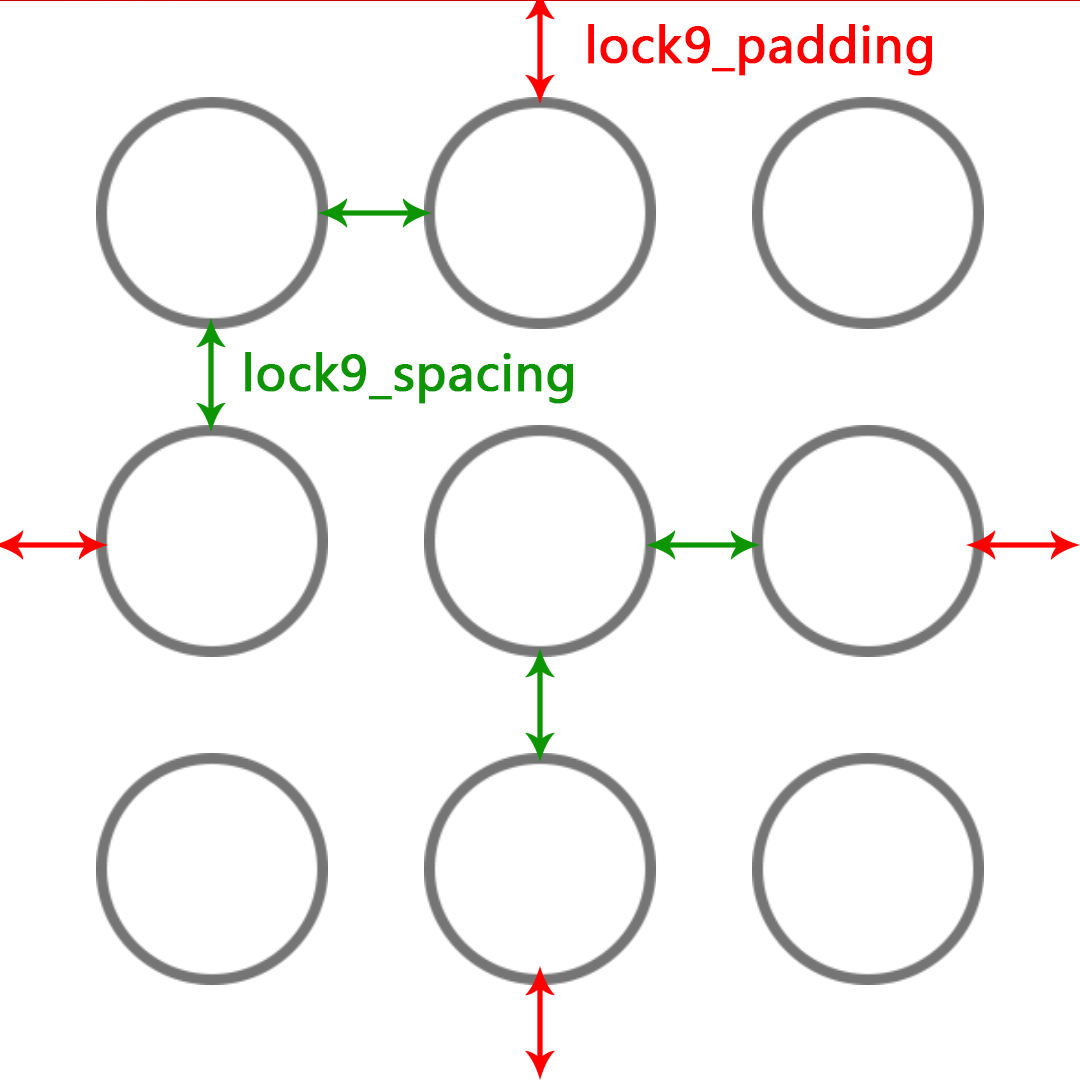
<style>
.page{position:relative;width:1080px;height:1080px;background:#ffffff}
.page>*{position:absolute;margin:0}
.t1{font:48px "MicrosoftYaHei";color:#ff0000;font-weight:bold}
.t2{font:48px "MicrosoftYaHei";color:#0e9504;font-weight:bold}
</style>
<div class="page">
<p class="t1" style="left:588px;top:24px;width:344px;height:52px">lock9_padding</p>
<p class="t2" style="left:245px;top:352px;width:328px;height:52px">lock9_spacing</p>
</div>
